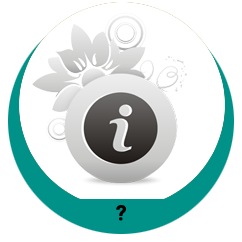
<style>
.page{position:relative;width:242px;height:242px;background:#ffffff}
.page>*{position:absolute;margin:0}
.t1{font:20px "CenturyGothic-Bold";color:#000000;font-weight:bold}
</style>
<div class="page">
<p class="t1" style="left:116px;top:205px;width:10px;height:16px">?</p>
</div>
